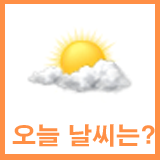
<style>
.page{position:relative;width:160px;height:160px;background:#ffffff}
.page>*{position:absolute;margin:0}
.t1{font:24px "H2gtrE";color:#ff8f45}
</style>
<div class="page">
<p class="t1" style="left:12px;top:124px;width:143px;height:23px">오늘 날씨는?</p>
</div>
